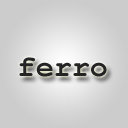
<style>
.page{position:relative;width:128px;height:128px;background:#cccccc}
.page>*{position:absolute;margin:0}
.t1{font:30px "CourierNewPS-BoldMT";color:#242424}
</style>
<div class="page">
<p class="t1" style="left:19px;top:57px;width:88px;height:20px">ferro</p>
</div>
